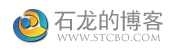
<style>
.page{position:relative;width:179px;height:50px;background:#ffffff}
.page>*{position:absolute;margin:0}
.t1{font:22px "JQHeiTiJT";color:#888888}
.t2{font:11px "TrajanPro-Regular";color:#999999;scale:1.04 1}
</style>
<div class="page">
<p class="t1" style="left:54px;top:9px;width:109px;height:22px">石龙的博客</p>
<p class="t2" style="left:56px;top:33px;width:105px;height:9px">www.stcbo.com</p>
</div>
